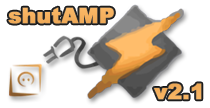
<style>
.page{position:relative;width:210px;height:108px;background:#ffffff}
.page>*{position:absolute;margin:0}
.t1{font:21.2px "Arial-Black";color:#f9b056;font-weight:bold}
</style>
<div class="page">
<p class="t1" style="left:8px;top:7px;width:106px;height:17px">shutAMP</p>
<p class="t1" style="left:154px;top:83px;width:48px;height:17px">v2.1</p>
</div>
